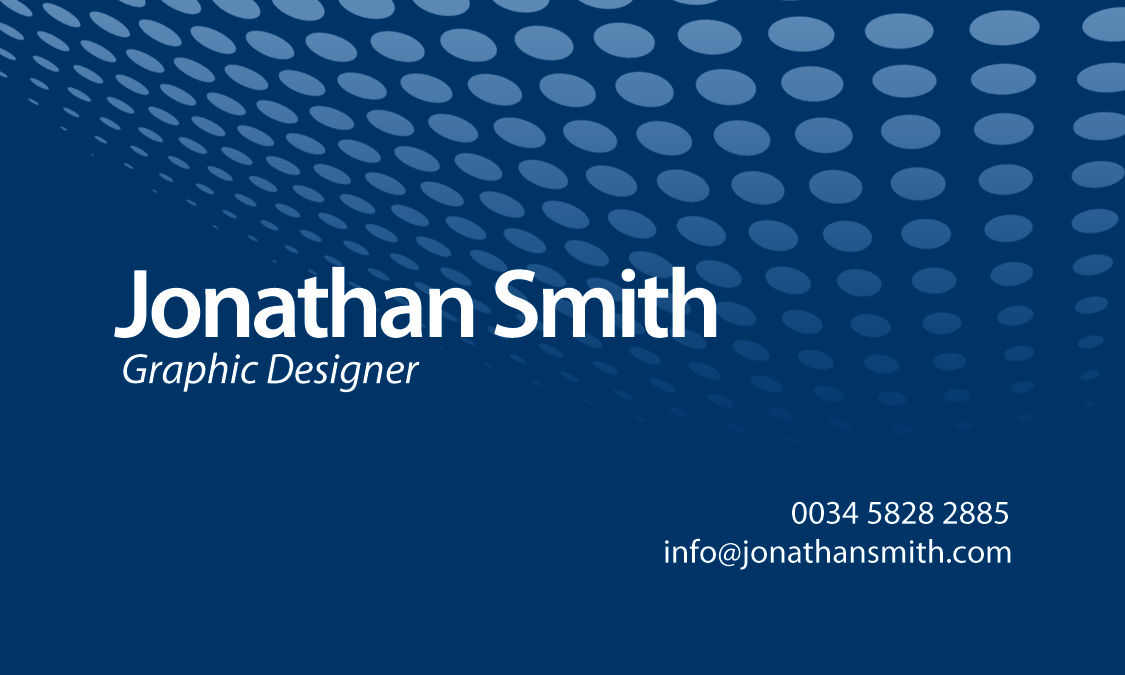
<style>
.page{position:relative;width:1125px;height:675px;background:#003366}
.page>*{position:absolute;margin:0}
.t1{font:99.1px "MyriadPro-Semibold";letter-spacing:-0.05em;color:#ffffff}
.t2{font:43.2px "MyriadPro-It";color:#ffffff}
.t3{font:33.3px "MyriadPro-Regular";color:#ffffff}
</style>
<div class="page">
<p class="t1" style="left:114px;top:266px;width:603px;height:72px">Jonathan Smith</p>
<p class="t2" style="left:123px;top:352px;width:297px;height:41px">Graphic Designer</p>
<p class="t3" style="left:792px;top:501px;width:216px;height:23px">0034 5828 2885</p>
<p class="t3" style="left:665px;top:538px;width:346px;height:32px">info@jonathansmith.com</p>
</div>
